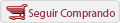
<style>
.page{position:relative;width:120px;height:23px;background:#f0f0f0}
.page>*{position:absolute;margin:0}
.t1{font:11px "MyriadPro-Regular";color:#983a55}
</style>
<div class="page">
<p class="t1" style="left:28px;top:9px;width:87px;height:10px">Seguir Comprando</p>
</div>
